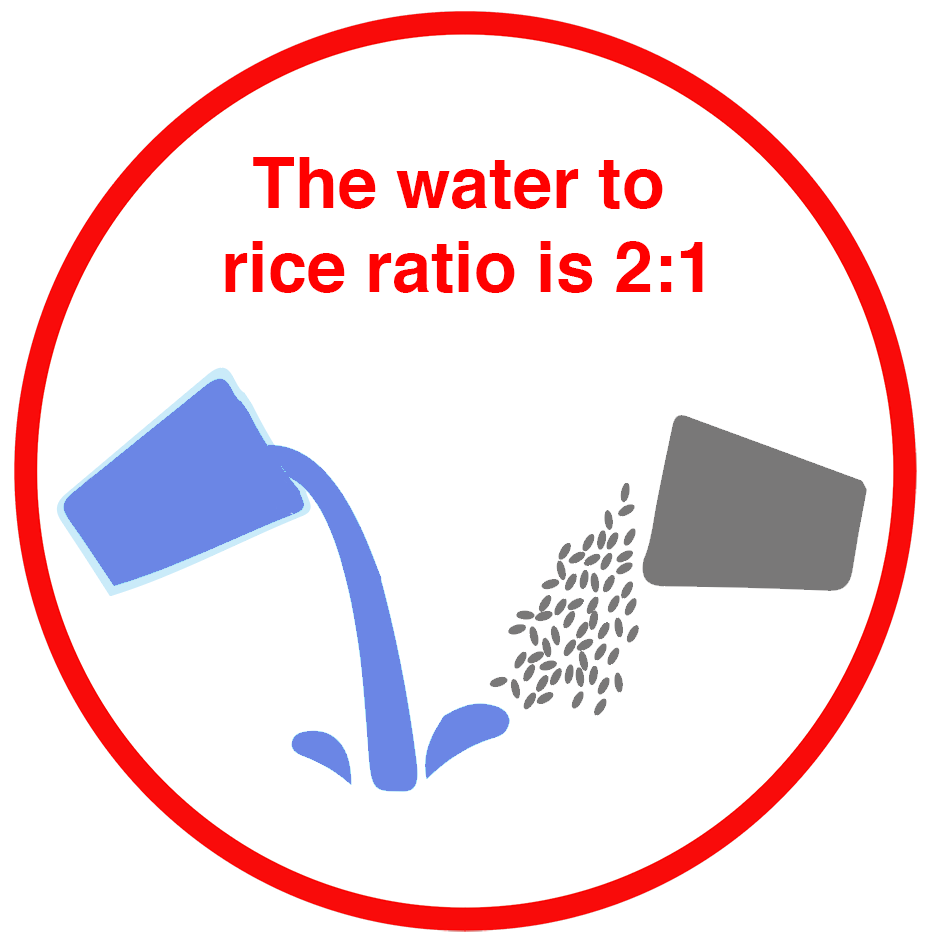
<style>
.page{position:relative;width:930px;height:940px;background:#ffffff}
.page>*{position:absolute;margin:0}
.t1{font:70px "Helvetica-Bold";color:#ff0000}
</style>
<div class="page">
<p class="t1" style="left:225px;top:157px;width:478px;height:136px;text-align:center">The water to <br>rice ratio is 2:1</p>
</div>
